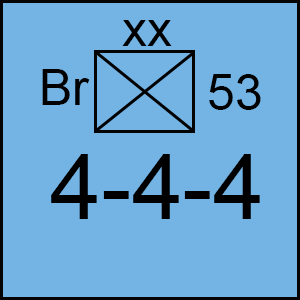
<style>
.page{position:relative;width:300px;height:300px;background:#74b4e4}
.page>*{position:absolute;margin:0}
.t1{font:50px "ArialMT";color:#000000}
.t2{font:91.7px "ArialMT";color:#000000}
</style>
<div class="page">
<p class="t1" style="left:122px;top:20px;width:50px;height:26px">xx</p>
<p class="t1" style="left:42px;top:69px;width:48px;height:36px">Br</p>
<p class="t1" style="left:209px;top:74px;width:52px;height:36px">53</p>
<p class="t2" style="left:51px;top:154px;width:209px;height:65px">4-4-4</p>
</div>
